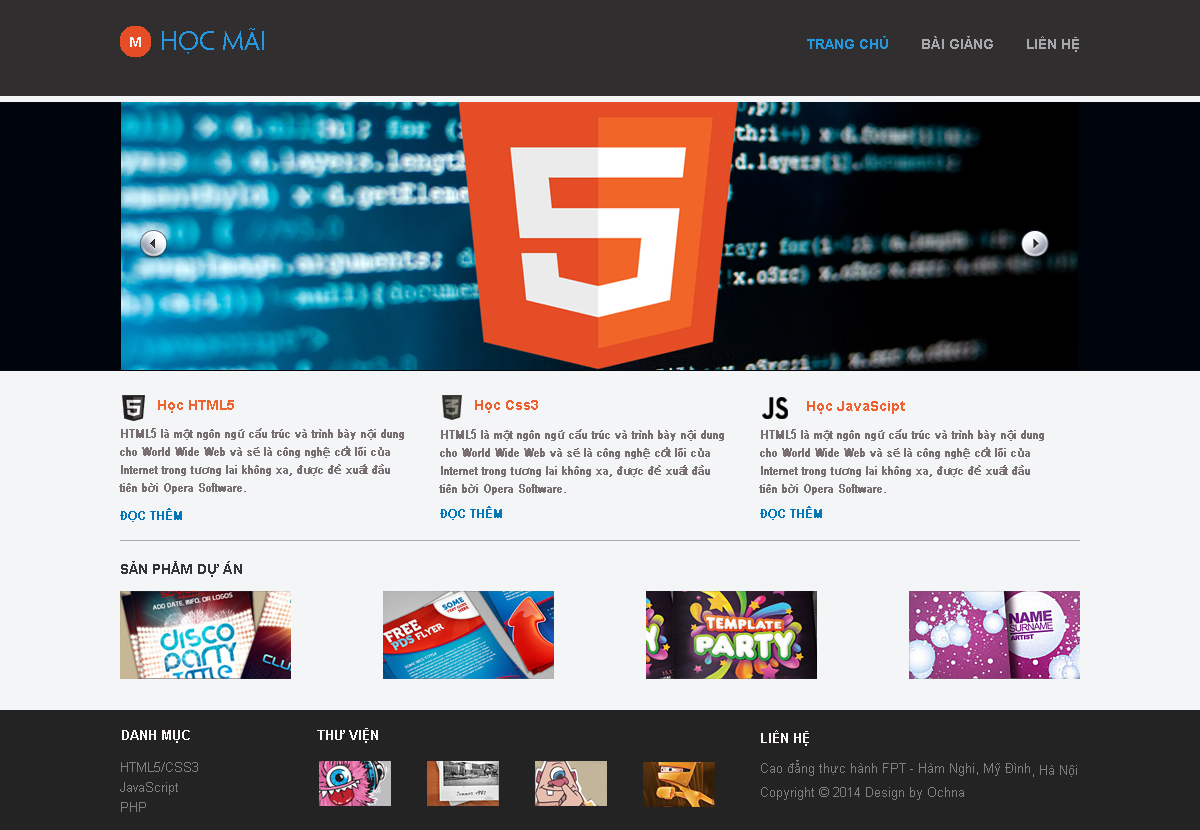
<style>
.page{position:relative;width:1200px;height:830px;background:#f4f5f6}
.page>*{position:absolute;margin:0}
.t1{font:14px "Arial-BoldMT";color:#a7a7ac}
.t2{font:14px "Arial-BoldMT";color:#2497e0}
.t3{font:14px "Arial-BoldMT";color:#ec6530}
.t4{font:14px "Arial-BoldMT";color:#ee6231}
.t5{font:12px/18px "ArialNarrow";color:#797171;font-weight:bold}
.t6{font:12px/18px "MyriadPro-Regular";color:#797171;font-weight:bold}
.t7{font:12px "ArialNarrow";color:#0676b7;font-weight:bold}
.t8{font:12px "MyriadPro-Regular";color:#0676b7;font-weight:bold}
.t9{font:14px "Arial-BoldMT";color:#333435}
.t10{font:13px "Arial-BoldMT";color:#fcf8f8}
.t11{font:13px/24px "ArialMT";color:#827f7f}
.t12{font:13px/20px "ArialMT";color:#827f7f}
.t13{font:13px "ArialMT";color:#827f7f}
</style>
<div class="page">
<p class="t1" style="left:807px;top:36px;width:272px;height:16px"><span class="t2">TRANG CHỦ        </span>BÀI GIẢNG        LIÊN HỆ</p>
<p class="t3" style="left:158px;top:400px;width:76px;height:13px">Học HTML5</p>
<p class="t4" style="left:475px;top:400px;width:63px;height:13px">Học Css3</p>
<p class="t4" style="left:807px;top:401px;width:98px;height:13px">Học JavaScipt</p>
<p class="t5" style="left:119px;top:428px;width:285px;height:66px">HTML5 là m<span class="t6">ộ</span>t ngôn ng<span class="t6">ữ</span> c<span class="t6">ấ</span>u trúc và trình bày n<span class="t6">ộ</span>i dung <br>cho World Wide Web và s<span class="t6">ẽ</span> là công ngh<span class="t6">ệ</span> c<span class="t6">ố</span>t lõi c<span class="t6">ủ</span>a <br>Internet trong t<span class="t6">ươ</span>ng lai không xa, đ<span class="t6">ượ</span>c đ<span class="t6">ề</span> xu<span class="t6">ấ</span>t đ<span class="t6">ầ</span>u <br>tiên b<span class="t6">ở</span>i Opera Software.</p>
<p class="t5" style="left:439px;top:429px;width:285px;height:66px">HTML5 là m<span class="t6">ộ</span>t ngôn ng<span class="t6">ữ</span> c<span class="t6">ấ</span>u trúc và trình bày n<span class="t6">ộ</span>i dung <br>cho World Wide Web và s<span class="t6">ẽ</span> là công ngh<span class="t6">ệ</span> c<span class="t6">ố</span>t lõi c<span class="t6">ủ</span>a <br>Internet trong t<span class="t6">ươ</span>ng lai không xa, đ<span class="t6">ượ</span>c đ<span class="t6">ề</span> xu<span class="t6">ấ</span>t đ<span class="t6">ầ</span>u <br>tiên b<span class="t6">ở</span>i Opera Software.</p>
<p class="t5" style="left:759px;top:429px;width:285px;height:66px">HTML5 là m<span class="t6">ộ</span>t ngôn ng<span class="t6">ữ</span> c<span class="t6">ấ</span>u trúc và trình bày n<span class="t6">ộ</span>i dung <br>cho World Wide Web và s<span class="t6">ẽ</span> là công ngh<span class="t6">ệ</span> c<span class="t6">ố</span>t lõi c<span class="t6">ủ</span>a <br>Internet trong t<span class="t6">ươ</span>ng lai không xa, đ<span class="t6">ượ</span>c đ<span class="t6">ề</span> xu<span class="t6">ấ</span>t đ<span class="t6">ầ</span>u <br>tiên b<span class="t6">ở</span>i Opera Software.</p>
<p class="t7" style="left:120px;top:508px;width:62px;height:14px">Đ<span class="t8">Ọ</span>C THÊM</p>
<p class="t7" style="left:440px;top:506px;width:62px;height:14px">Đ<span class="t8">Ọ</span>C THÊM</p>
<p class="t7" style="left:760px;top:506px;width:62px;height:14px">Đ<span class="t8">Ọ</span>C THÊM</p>
<p class="t9" style="left:121px;top:561px;width:121px;height:16px">SẢN PHẨM DỰ ÁN</p>
<p class="t10" style="left:122px;top:730px;width:68px;height:13px">DANH MỤC</p>
<p class="t10" style="left:317px;top:728px;width:61px;height:15px">THƯ VIỆN</p>
<p class="t10" style="left:761px;top:730px;width:48px;height:16px">LIÊN HỆ</p>
<p class="t11" style="left:761px;top:760px;width:269px;height:40px">Cao đẳng thực hành FPT - Hàm Nghi, Mỹ Đình<br>Copyright © 2014 Design by Ochna</p>
<p class="t12" style="left:120px;top:762px;width:78px;height:50px">HTML5/CSS3<br>JavaScript<br>PHP</p>
<p class="t13" style="left:1033px;top:765px;width:44px;height:12px">, Hà Nội</p>
</div>
